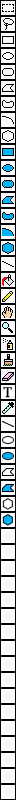
<style>
.page{position:relative;width:16px;height:800px;background:#ffffff}
.page>*{position:absolute;margin:0}
.t1{font:14px "Palatino-Roman";color:#000000;font-weight:bold}
</style>
<div class="page">
<p class="t1" style="left:3px;top:387px;width:9px;height:11px">T</p>
</div>
